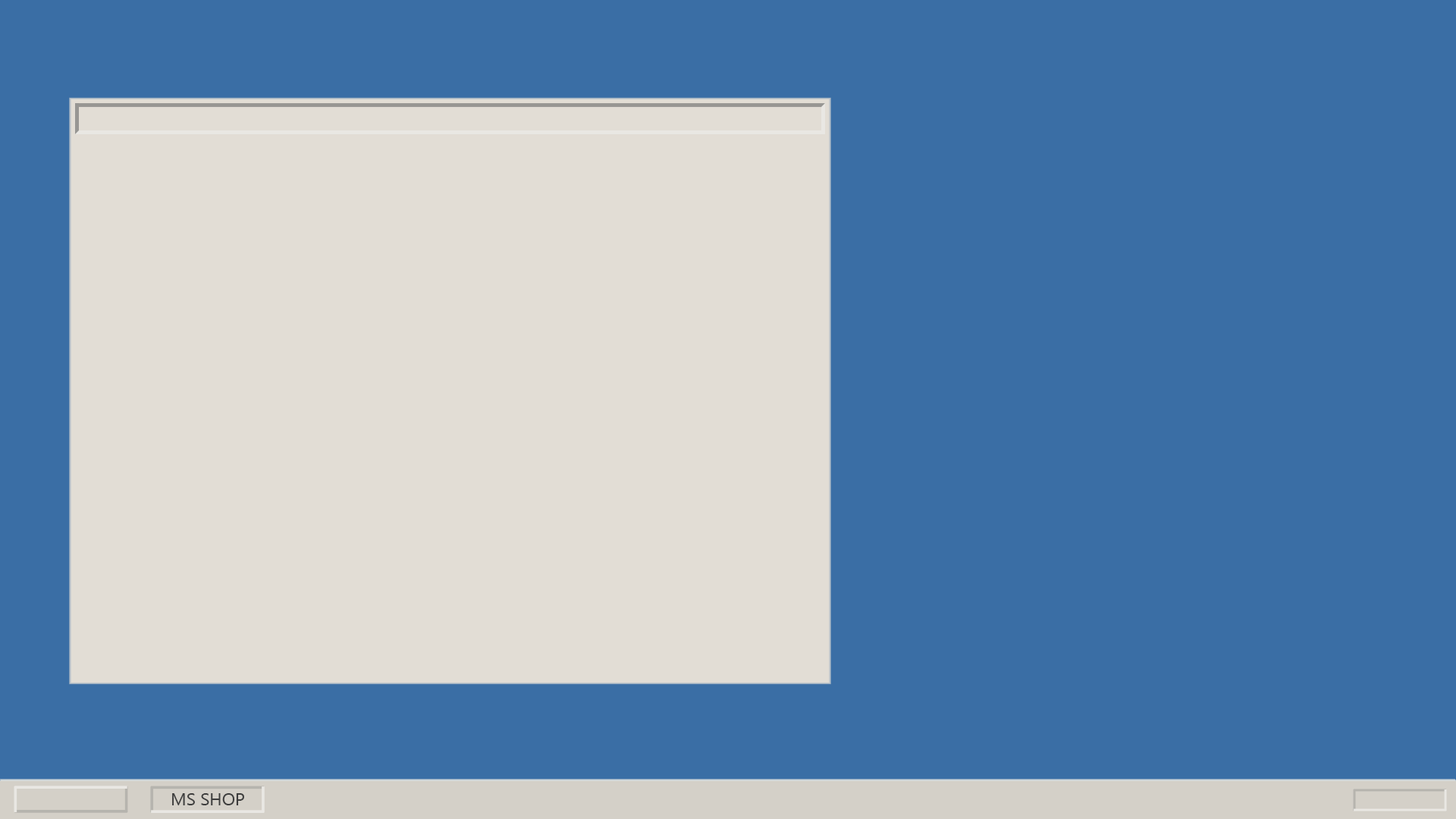
<style>
.page{position:relative;width:1456px;height:819px;background:#3a6ea5}
.page>*{position:absolute;margin:0}
.t1{font:17.4px "SegoeUIHistoric";color:#3d3d3d;text-transform:uppercase}
</style>
<div class="page">
<p class="t1" style="left:172px;top:793px;width:72px;height:12px">MS Shop</p>
</div>
